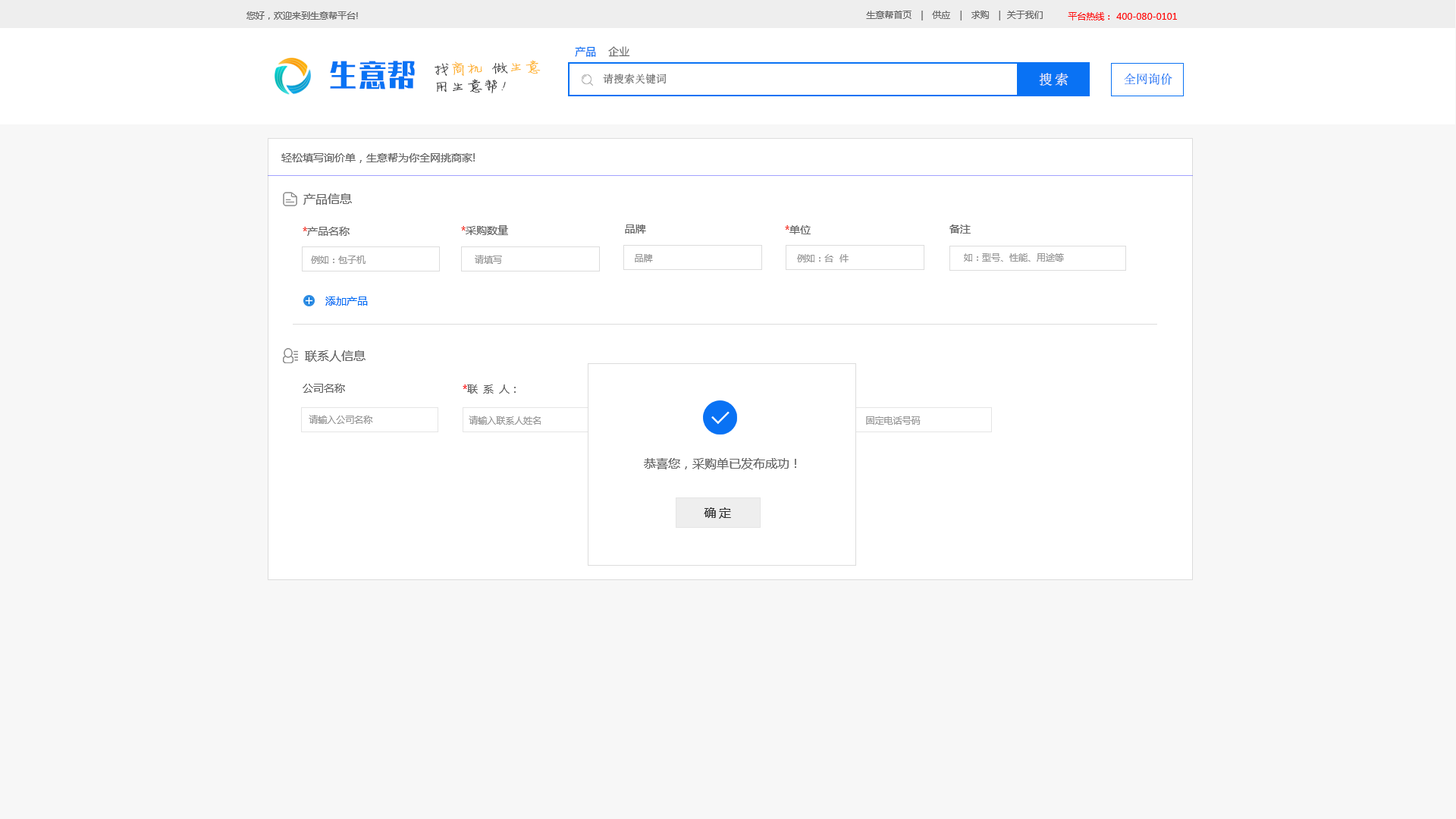
<style>
.page{position:relative;width:1456px;height:819px;background:#f7f7f7}
.page>*{position:absolute;margin:0}
.t1{font:9.1px "MicrosoftYaHei";color:#666666;text-transform:uppercase}
.t2{font:9.1px "MicrosoftYaHei";color:#fe0808;text-transform:uppercase}
.t3{font:10.6px "MicrosoftYaHei";color:#0972f4}
.t4{font:10.6px "MicrosoftYaHei";color:#666666}
.t5{font:30.6px "AliHYAiHei";color:#0972f4;scale:0.95 1}
.t6{font:15.2px/17.6px "FZJLJW--GB1-0";letter-spacing:-0.04em;scale:1.15 1}
.t7{font:15.2px/17.6px "FZJLJW--GB1-0";letter-spacing:-0.06em;scale:1.15 1}
.t8{font:10.6px "FandolSong-Regular";color:#666666}
.t9{font:13.6px "FandolSong-Regular";letter-spacing:0.16em;color:#f3f5f7}
.t10{font:12.1px "FandolSong-Regular";color:#0972f4}
.t11{font:12.1px "MicrosoftYaHei";color:#666666}
.t12{font:10.6px "MicrosoftYaHei";color:#f32313}
.t13{font:9.1px "MicrosoftYaHei";color:#999999}
.t14{font:10.6px "MicrosoftYaHei";color:#fc0404}
.t15{font:12.1px "MicrosoftYaHei";letter-spacing:0.22em;color:#333333}
</style>
<div class="page">
<p class="t1" style="left:246px;top:11px;width:112px;height:9px">您好，欢迎来到生意帮平台!</p>
<p class="t1" style="left:866px;top:11px;width:177px;height:9px">生意帮首页   |   供应   |   求购   |  关于我们</p>
<p class="t2" style="left:1068px;top:12px;width:109px;height:8px">平台热线： 400-080-0101</p>
<p class="t3" style="left:575px;top:46px;width:55px;height:11px">产品<span class="t4">    企业</span></p>
<p class="t5" style="left:330px;top:61px;width:85px;height:28px">生意帮</p>
<p class="t6" style="left:435px;top:60px;width:106px;height:33px;rotate:-1deg">找商机  做<span class="t7">生意 <br></span>用生意帮！</p>
<p class="t8" style="left:603px;top:74px;width:64px;height:10px">请搜索关键词</p>
<p class="t9" style="left:1039px;top:73px;width:29px;height:13px">搜索</p>
<p class="t10" style="left:1124px;top:73px;width:48px;height:12px">全网询价</p>
<p class="t4" style="left:281px;top:153px;width:194px;height:10px">轻松填写询价单，生意帮为你全网挑商家!</p>
<p class="t11" style="left:303px;top:193px;width:49px;height:12px">产品信息</p>
<p class="t4" style="left:303px;top:227px;width:47px;height:9px"><span class="t12">*</span>产品名称</p>
<p class="t4" style="left:461px;top:225px;width:47px;height:10px"><span class="t12">*</span>采购数量</p>
<p class="t4" style="left:625px;top:224px;width:21px;height:10px">品牌</p>
<p class="t4" style="left:785px;top:225px;width:26px;height:9px"><span class="t12">*</span>单位</p>
<p class="t4" style="left:949px;top:224px;width:22px;height:10px">备注</p>
<p class="t13" style="left:311px;top:256px;width:55px;height:8px">例如：包子机</p>
<p class="t13" style="left:475px;top:255px;width:27px;height:9px">请填写</p>
<p class="t13" style="left:635px;top:254px;width:18px;height:8px">品牌</p>
<p class="t13" style="left:797px;top:254px;width:52px;height:8px">例如：台  件</p>
<p class="t13" style="left:964px;top:253px;width:100px;height:9px">如：型号、性能、用途等</p>
<p class="t3" style="left:325px;top:297px;width:43px;height:9px">添加产品</p>
<p class="t11" style="left:305px;top:350px;width:61px;height:12px">联系人信息</p>
<p class="t4" style="left:303px;top:384px;width:42px;height:9px">公司名称</p>
<p class="t4" style="left:463px;top:384px;width:53px;height:10px"><span class="t14">*</span>联 系 人：</p>
<p class="t13" style="left:309px;top:415px;width:64px;height:9px">请输入公司名称</p>
<p class="t13" style="left:469px;top:416px;width:72px;height:9px">请输入联系人姓名</p>
<p class="t13" style="left:866px;top:416px;width:55px;height:9px">固定电话号码</p>
<p class="t11" style="left:644px;top:458px;width:152px;height:11px">恭喜您，采购单已发布成功！</p>
<p class="t15" style="left:704px;top:507px;width:27px;height:12px">确定</p>
</div>
